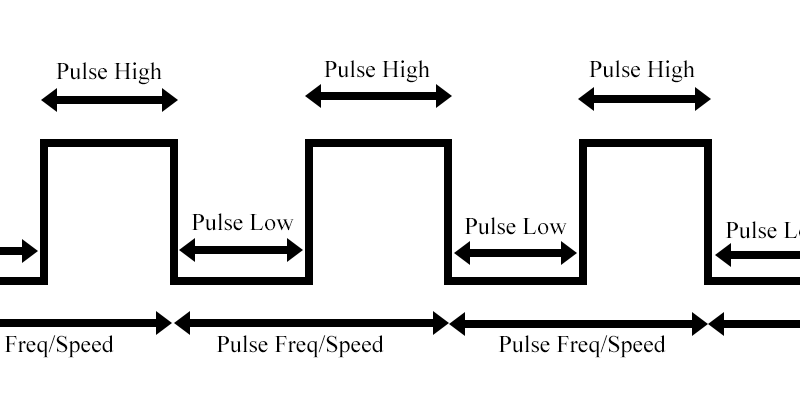
<style>
.page{position:relative;width:800px;height:400px;background:#ffffff}
.page>*{position:absolute;margin:0}
.t1{font:24px "TimesNewRomanPSMT";color:#000000}
</style>
<div class="page">
<p class="t1" style="left:56px;top:62px;width:106px;height:23px">Pulse High</p>
<p class="t1" style="left:324px;top:60px;width:106px;height:23px">Pulse High</p>
<p class="t1" style="left:589px;top:60px;width:106px;height:23px">Pulse High</p>
<p class="t1" style="left:191px;top:213px;width:103px;height:18px">Pulse Low</p>
<p class="t1" style="left:464px;top:217px;width:103px;height:18px">Pulse Low</p>
<p class="t1" style="left:216px;top:335px;width:168px;height:23px">Pulse Freq/Speed</p>
<p class="t1" style="left:498px;top:335px;width:168px;height:23px">Pulse Freq/Speed</p>
</div>
